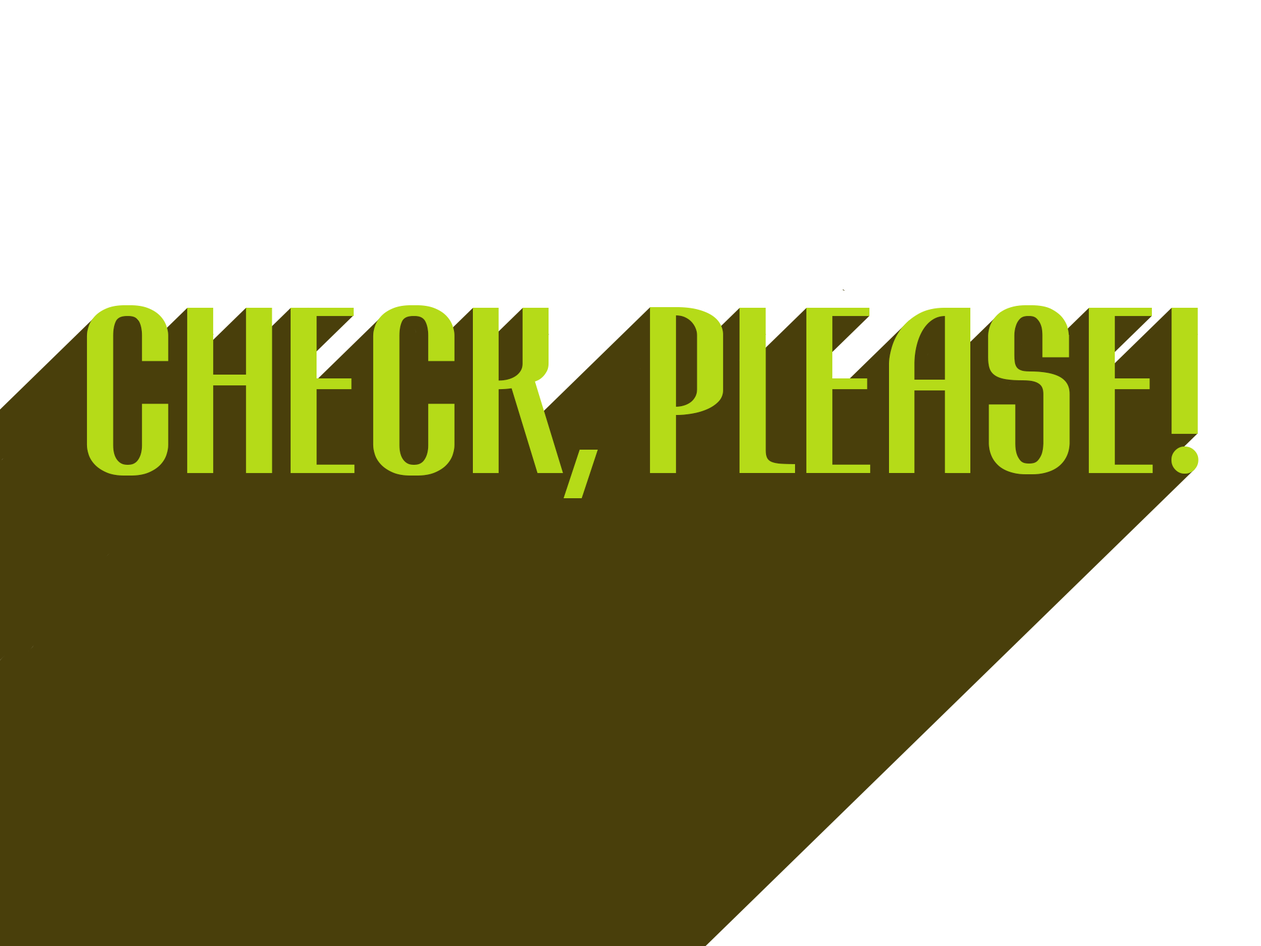
<style>
.page{position:relative;width:1261px;height:946px;background:#ffffff}
.page>*{position:absolute;margin:0}
.t1{font:189px "Atvice-Bold";color:#b5db18}
</style>
<div class="page">
<p class="t1" style="left:86px;top:305px;width:1113px;height:193px">CHECK, PLEASE!</p>
</div>
